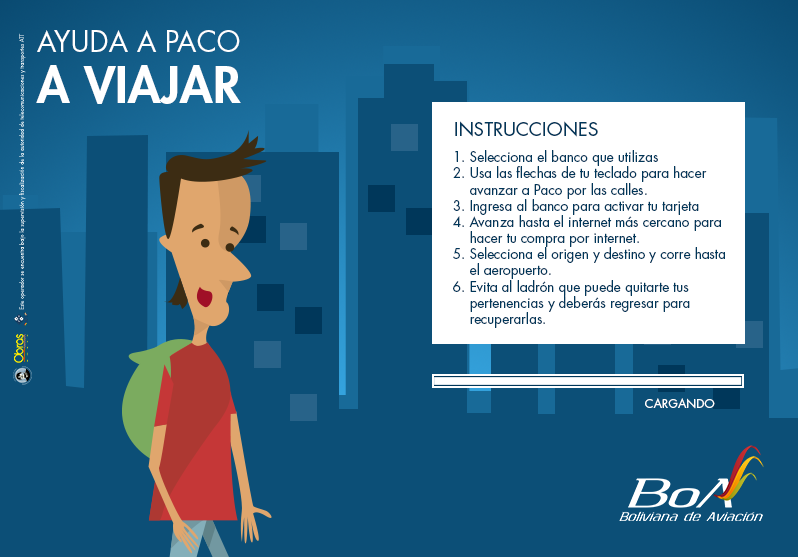
<style>
.page{position:relative;width:798px;height:557px;background:#0c4f77}
.page>*{position:absolute;margin:0}
.t1{font:28px "FuturaStd-Book";color:#ffffff;text-transform:uppercase}
.t2{font:48.7px "FuturaStd-Heavy";color:#ffffff;text-transform:uppercase}
.t3{font:18.5px "FuturaStd-Book";color:#00375a;text-transform:uppercase}
.t4{font:13.5px "FuturaStd-Book";color:#00375a}
.t5{font:11.9px "FuturaStd-Book";color:#ffffff;text-transform:uppercase}
</style>
<div class="page">
<p class="t1" style="left:37px;top:30px;width:203px;height:22px">Ayuda a paco</p>
<p class="t2" style="left:36px;top:65px;width:205px;height:39px">a viajar</p>
<p class="t3" style="left:455px;top:121px;width:143px;height:16px">Instrucciones</p>
<p class="t4" style="left:453px;top:150px;width:272px;height:178px">1. Selecciona el banco que utilizas<br>2. Usa las flechas de tu teclado para hacer <br>    avanzar a Paco por las calles.<br>3. Ingresa al banco para activar tu tarjeta<br>4. Avanza hasta el internet más cercano para <br>    hacer tu compra por internet.<br>5. Selecciona el origen y destino y corre hasta <br>    el aeropuerto.<br>6. Evita al ladrón que puede quitarte tus <br>    pertenencias y deberás regresar para <br>    recuperarlas.</p>
<p class="t5" style="left:645px;top:398px;width:70px;height:11px">cargando</p>
</div>
